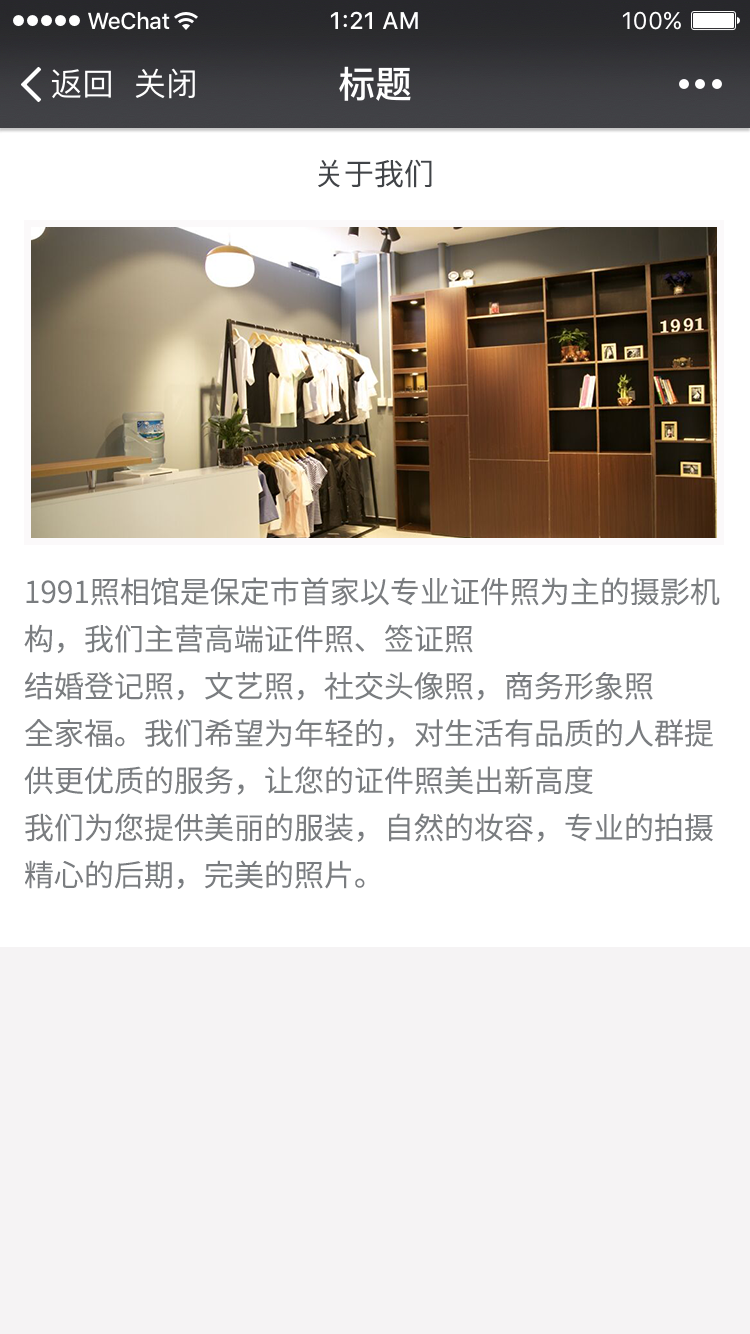
<style>
.page{position:relative;width:750px;height:1334px;background:#ffffff}
.page>*{position:absolute;margin:0}
.t1{font:30px "NotoSansCJK-DemiLight";color:#414448}
.t2{font:30px/24px "NotoSansCJK-DemiLight";color:#7a7d80}
</style>
<div class="page">
<p class="t1" style="left:318px;top:159px;width:114px;height:29px">关于我们</p>
<p class="t2" style="left:24px;top:577px;width:696px;height:312px">1991照相馆是保定市首家以专业证件照为主的摄影机<br>构，我们主营高端证件照、签证照<br>结婚登记照，文艺照，社交头像照，商务形象照<br>全家福。我们希望为年轻的，对生活有品质的人群提<br>供更优质的服务，让您的证件照美出新高度<br>我们为您提供美丽的服装，自然的妆容，专业的拍摄<br>精心的后期，完美的照片。</p>
</div>
